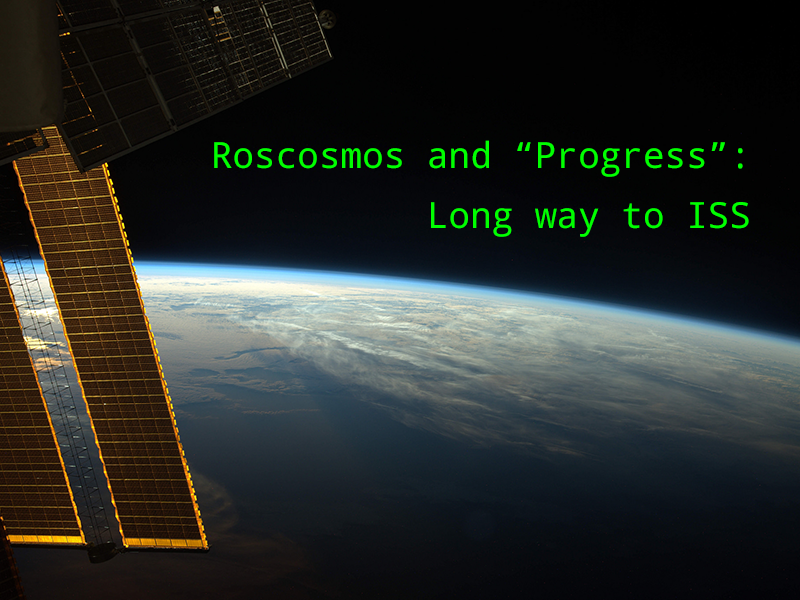
<style>
.page{position:relative;width:800px;height:600px}
.page>*{position:absolute;margin:0}
.t1{font:36px/60px "DroidSansMono";color:#00ff00}
</style>
<div class="page">
<p class="t1" style="left:214px;top:140px;width:535px;height:97px;text-align:right">Roscosmos and “Progress”:<br>Long way to ISS</p>
</div>
